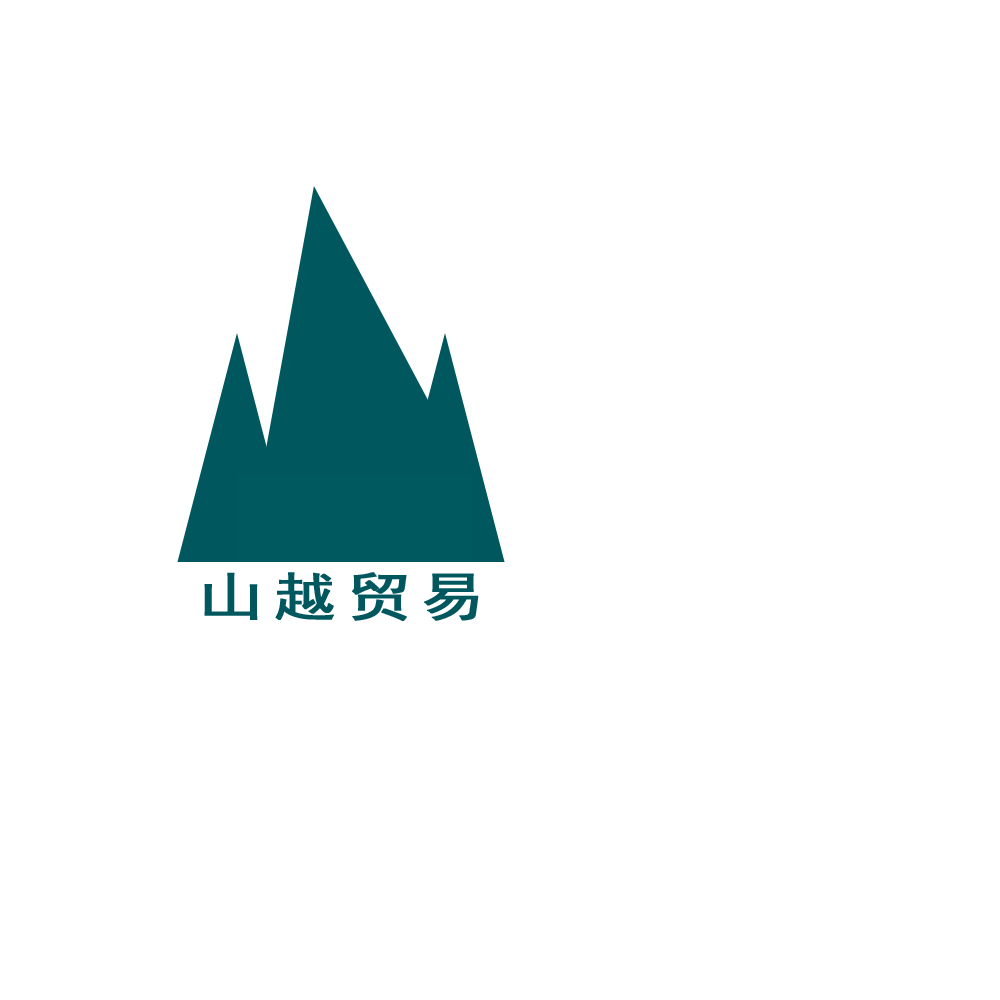
<style>
.page{position:relative;width:1000px;height:1000px;background:#ffffff}
.page>*{position:absolute;margin:0}
.t1{font:53.3px "SimHei";letter-spacing:0.13em;color:#00585e;font-weight:bold;scale:1.2 1}
</style>
<div class="page">
<p class="t1" style="left:204px;top:572px;width:275px;height:49px">山越贸易</p>
</div>
